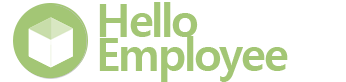
<style>
.page{position:relative;width:346px;height:82px;background:#ffffff}
.page>*{position:absolute;margin:0}
.t1{font:45px/34px "MalgunGothicBold";letter-spacing:-0.05em;color:#a3c675}
</style>
<div class="page">
<p class="t1" style="left:99px;top:2px;width:189px;height:80px">Hello<br>Employee</p>
</div>
